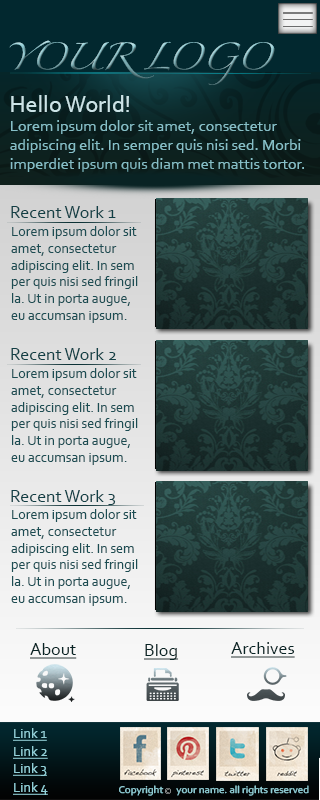
<style>
.page{position:relative;width:320px;height:800px}
.page>*{position:absolute;margin:0}
.t1{font:24px "Zapfino"}
.t2{font:16px "Corbel";color:#86bfc7}
.t3{font:24px "Corbel";color:#cce4e7}
.t4{font:18px "Corbel";color:#113f45}
.t5{font:14px "Corbel";color:#1c4d53}
.t6{font:18px "Corbel";color:#082425;text-decoration:underline}
.t7{font:14px "Corbel";color:#92d0d8;text-decoration:underline}
.t8{font:10.1px "Corbel";color:#92d0d8;scale:1.08 1}
</style>
<div class="page">
<p class="t1" style="left:9px;top:40px;width:266px;height:45px">YOUR LOGO</p>
<p class="t2" style="left:10px;top:95px;width:294px;height:77px"><span class="t3">Hello World!<br></span>Lorem ipsum dolor sit amet, consectetur<br>adipiscing elit. In semper quis nisi sed. Morbi <br>imperdiet ipsum quis diam met mattis tortor.</p>
<p class="t4" style="left:11px;top:206px;width:105px;height:12px">Recent Work 1</p>
<p class="t5" style="left:11px;top:226px;width:127px;height:97px">Lorem ipsum dolor sit <br>amet, consectetur <br>adipiscing elit. In sem<br>per quis nisi sed fringil<br>la. Ut in porta augue, <br>eu accumsan ipsum.</p>
<p class="t4" style="left:11px;top:348px;width:105px;height:12px">Recent Work 2</p>
<p class="t5" style="left:11px;top:368px;width:127px;height:97px">Lorem ipsum dolor sit <br>amet, consectetur <br>adipiscing elit. In sem<br>per quis nisi sed fringil<br>la. Ut in porta augue, <br>eu accumsan ipsum.</p>
<p class="t4" style="left:11px;top:490px;width:105px;height:15px">Recent Work 3</p>
<p class="t5" style="left:11px;top:509px;width:127px;height:97px">Lorem ipsum dolor sit <br>amet, consectetur <br>adipiscing elit. In sem<br>per quis nisi sed fringil<br>la. Ut in porta augue, <br>eu accumsan ipsum.</p>
<p class="t6" style="left:30px;top:643px;width:47px;height:16px">About</p>
<p class="t6" style="left:144px;top:644px;width:35px;height:16px">Blog</p>
<p class="t6" style="left:231px;top:642px;width:64px;height:16px">Archives</p>
<p class="t7" style="left:13px;top:728px;width:34px;height:13px">Link 1</p>
<p class="t7" style="left:13px;top:746px;width:35px;height:13px">Link 2</p>
<p class="t7" style="left:13px;top:763px;width:34px;height:13px">Link 3</p>
<p class="t7" style="left:13px;top:782px;width:35px;height:13px">Link 4</p>
<p class="t8" style="left:119px;top:785px;width:190px;height:11px">Copyright      your name. all rights reserved</p>
</div>
